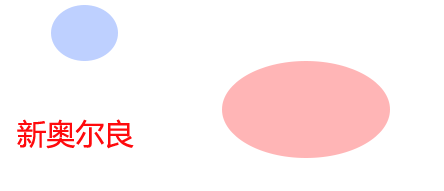
<style>
.page{position:relative;width:444px;height:191px;background:#ffffff}
.page>*{position:absolute;margin:0}
.t1{font:29.2px "MicrosoftYaHei";color:#ff0a0d;text-transform:uppercase}
</style>
<div class="page">
<p class="t1" style="left:17px;top:119px;width:117px;height:30px">新奥尔良</p>
</div>
